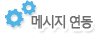
<style>
.page{position:relative;width:95px;height:35px;background:#ffffff}
.page>*{position:absolute;margin:0}
.t1{font:14px "MalgunGothicRegular";letter-spacing:-0.15em;color:#6e6e6e;font-weight:bold;scale:0.95 1}
</style>
<div class="page">
<p class="t1" style="left:31px;top:15px;width:62px;height:14px">메시지 연동</p>
</div>
